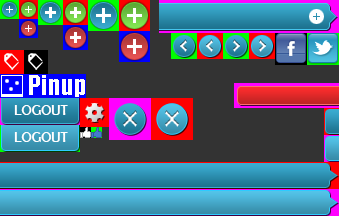
<style>
.page{position:relative;width:339px;height:216px;background:#333333}
.page>*{position:absolute;margin:0}
.t1{font:25px "Impact";color:#ffffff}
.t2{font:14px "BerlinSansFB-Reg";color:#ffffff}
</style>
<div class="page">
<p class="t1" style="left:29px;top:75px;width:56px;height:22px">Pinup</p>
<p class="t2" style="left:14px;top:105px;width:54px;height:10px">LOGOUT</p>
<p class="t2" style="left:14px;top:132px;width:54px;height:10px">LOGOUT</p>
</div>
